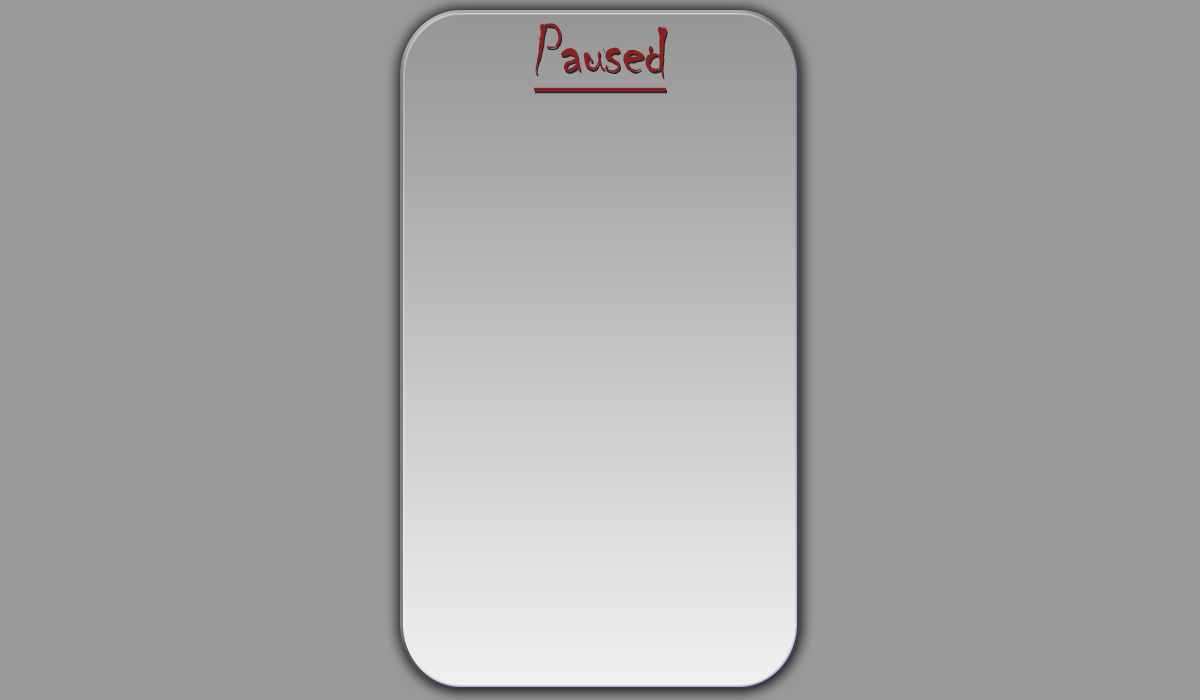
<style>
.page{position:relative;width:1200px;height:700px;background:#999999}
.page>*{position:absolute;margin:0}
.t1{font:71.8px "Chiller-Regular";letter-spacing:-0.025em;color:#892122;text-decoration:underline}
</style>
<div class="page">
<p class="t1" style="left:534px;top:23px;width:133px;height:69px">Paused</p>
</div>
